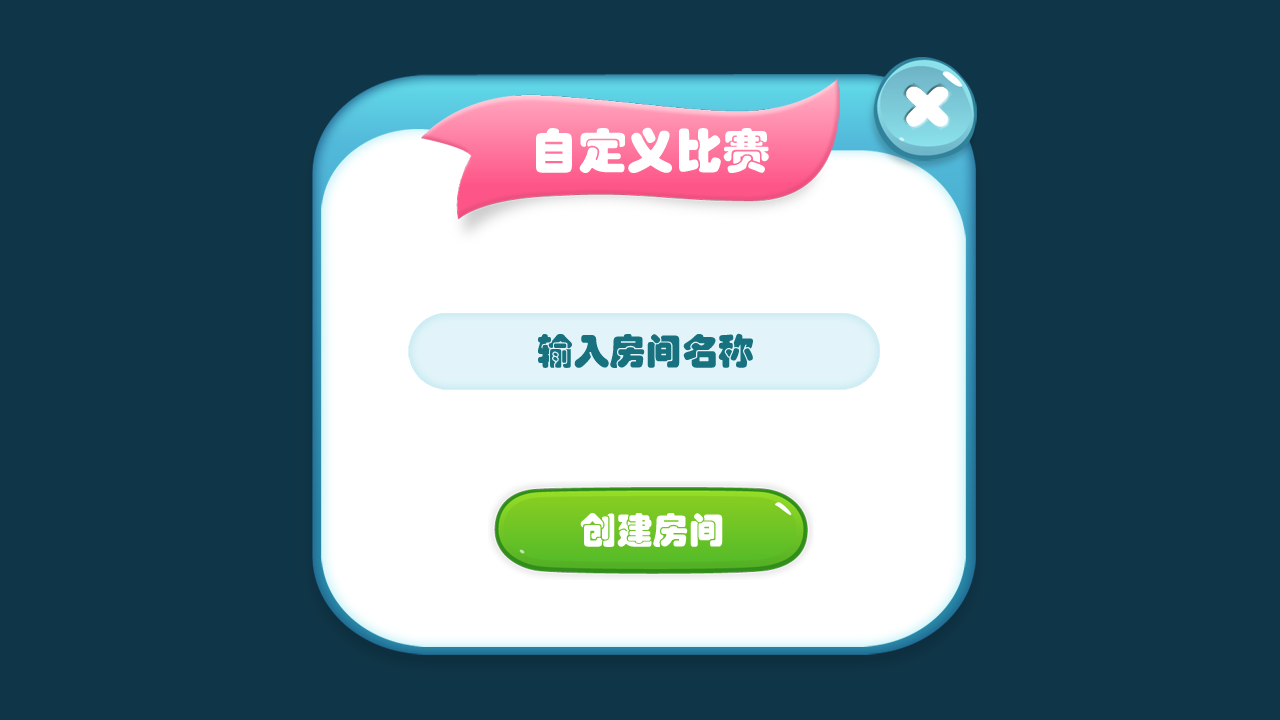
<style>
.page{position:relative;width:1280px;height:720px;background:#0f3648}
.page>*{position:absolute;margin:0}
.t1{font:48px "STHupo";color:#ffffff}
.t2{font:36.2px "STHupo";color:#18717e}
.t3{font:36.2px "STHupo";color:#ffffff}
</style>
<div class="page">
<p class="t1" style="left:536px;top:127px;width:233px;height:46px">自定义比赛</p>
<p class="t2" style="left:538px;top:333px;width:215px;height:35px">输入房间名称</p>
<p class="t3" style="left:580px;top:513px;width:143px;height:34px">创建房间</p>
</div>
